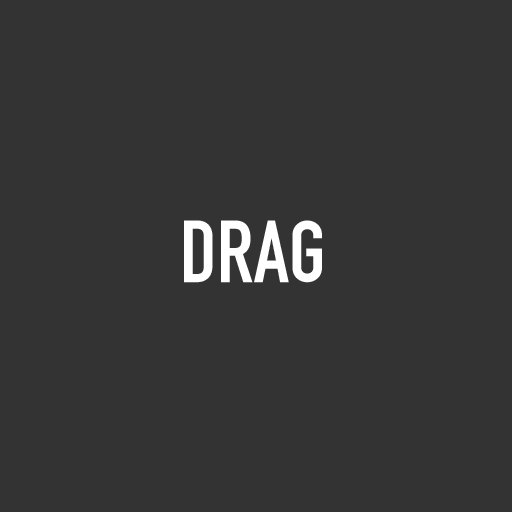
<style>
.page{position:relative;width:512px;height:512px;background:#333333}
.page>*{position:absolute;margin:0}
.t1{font:86px "DINEngschrift";color:#ffffff}
</style>
<div class="page">
<p class="t1" style="left:184px;top:220px;width:138px;height:63px">DRAG</p>
</div>
